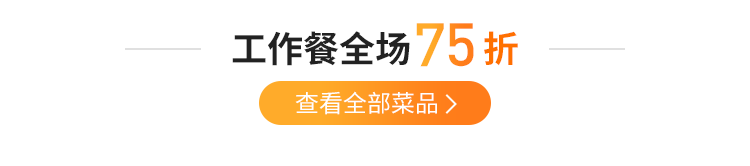
<style>
.page{position:relative;width:750px;height:166px;background:#ffffff}
.page>*{position:absolute;margin:0}
.t1{font:60px "DIN-MediumAlternate";letter-spacing:-0.01em}
.t2{font:36px "SourceHanSansCN-Bold";color:#222222}
.t3{font:36px "SourceHanSansCN-Bold";color:#ff7000}
.t4{font:24px "SourceHanSansCN-Regular";color:#ffffff}
</style>
<div class="page">
<p class="t1" style="left:416px;top:23px;width:58px;height:44px">75</p>
<p class="t2" style="left:232px;top:31px;width:178px;height:35px">工作餐全场</p>
<p class="t3" style="left:484px;top:31px;width:34px;height:35px">折</p>
<p class="t4" style="left:295px;top:91px;width:142px;height:24px">查看全部菜品</p>
</div>
